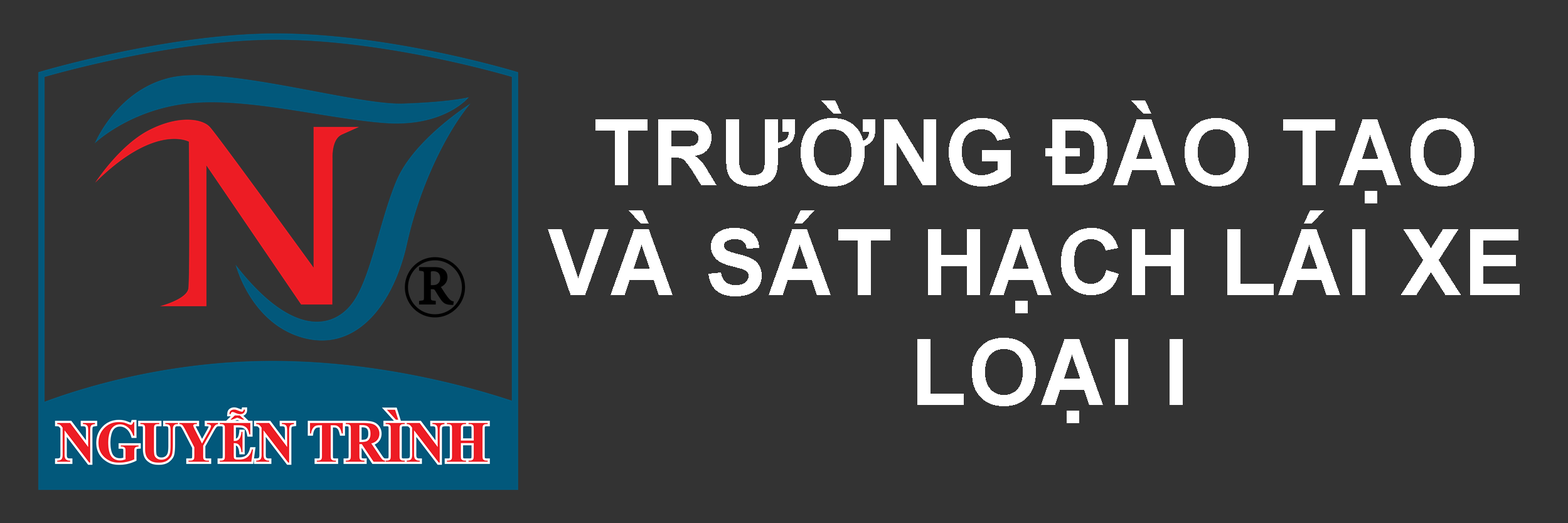
<style>
.page{position:relative;width:1568px;height:523px;background:#333333}
.page>*{position:absolute;margin:0}
.t1{font:91.5px "Arial-BoldMT";letter-spacing:0.02em;color:#ffffff}
</style>
<div class="page">
<p class="t1" style="left:548px;top:100px;width:972px;height:323px;text-align:center">TRƯỜNG ĐÀO TẠO <br>VÀ SÁT HẠCH LÁI XE <br>LOẠI I</p>
</div>
